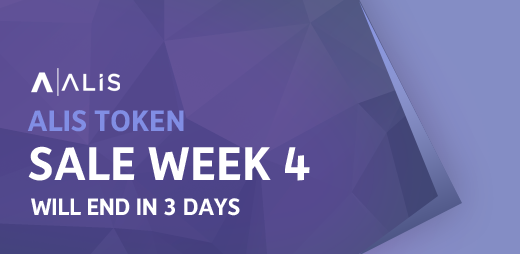
<style>
.page{position:relative;width:520px;height:254px}
.page>*{position:absolute;margin:0}
.t1{font:29.9px "Depot-Bold";color:#818ee4;text-transform:uppercase}
.t2{font:47.8px "Depot-Bold";color:#ffffff;text-transform:uppercase}
.t3{font:23.9px "Depot-Bold";letter-spacing:-0.02em;color:#ffffff;text-transform:uppercase}
</style>
<div class="page">
<p class="t1" style="left:27px;top:110px;width:157px;height:22px">ALIS TOKEN</p>
<p class="t2" style="left:28px;top:146px;width:282px;height:35px">SALE week 4</p>
<p class="t3" style="left:31px;top:198px;width:209px;height:18px">will end In 3 Days</p>
</div>
